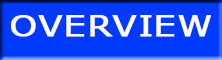
<style>
.page{position:relative;width:222px;height:60px;background:#003afe}
.page>*{position:absolute;margin:0}
.t1{font:28.4px "Verdana";color:#ffffff;font-weight:bold;scale:1.25 1}
</style>
<div class="page">
<p class="t1" style="left:11px;top:15px;width:200px;height:22px">OVERVIEW</p>
</div>
